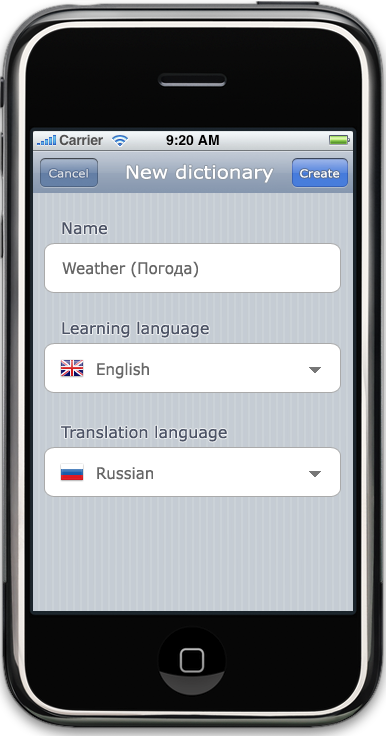
<style>
.page{position:relative;width:386px;height:742px}
.page>*{position:absolute;margin:0}
.t1{font:11px "Verdana";color:#dbdfe5;scale:1.1 1}
.t2{font:18px "Verdana";color:#ffffff;scale:1.11 1}
.t3{font:11px "Verdana";color:#ffffff;scale:1.1 1}
.t4{font:16px "Verdana";color:#4c5365}
.t5{font:16px "Verdana";color:#666666;scale:0.94 1}
</style>
<div class="page">
<p class="t1" style="left:49px;top:169px;width:39px;height:9px">Cancel</p>
<p class="t2" style="left:126px;top:164px;width:148px;height:19px">New dictionary</p>
<p class="t3" style="left:300px;top:169px;width:40px;height:9px">Create</p>
<p class="t4" style="left:62px;top:222px;width:45px;height:13px">Name</p>
<p class="t5" style="left:62px;top:261px;width:136px;height:17px">Weather (Погода)</p>
<p class="t4" style="left:62px;top:321px;width:147px;height:17px">Learning language</p>
<p class="t5" style="left:97px;top:362px;width:52px;height:17px">English</p>
<p class="t4" style="left:61px;top:425px;width:166px;height:17px">Translation language</p>
<p class="t5" style="left:97px;top:467px;width:56px;height:13px">Russian</p>
</div>
